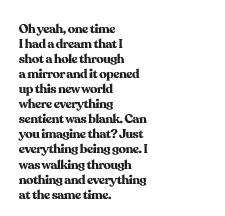
<style>
.page{position:relative;width:225px;height:216px;background:#ffffff}
.page>*{position:absolute;margin:0}
.t1{font:12.5px "Recoleta-Bold";letter-spacing:-0.04em;color:#211f1f}
</style>
<div class="page">
<p class="t1" style="left:18px;top:23px;width:130px;height:176px">Oh yeah, one time<br>I had a dream that I<br>shot a hole through<br>a mirror and it opened<br>up this new world<br>where everything<br>sentient was blank. Can<br>you imagine that? Just<br>everything being gone. I<br>was walking through<br>nothing and everything<br>at the same time.</p>
</div>
